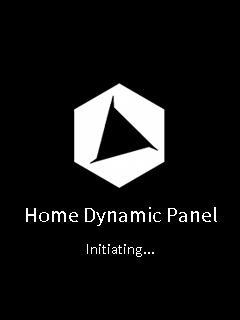
<style>
.page{position:relative;width:240px;height:320px;background:#000000}
.page>*{position:absolute;margin:0}
.t1{font:19px "TaipeiSansTCBeta-Regular";color:#ffffff}
.t2{font:13px "TaipeiSansTCBeta-Regular";color:#ffffff}
</style>
<div class="page">
<p class="t1" style="left:26px;top:207px;width:191px;height:19px">Home Dynamic Panel</p>
<p class="t2" style="left:87px;top:244px;width:67px;height:13px">Initiating...</p>
</div>
